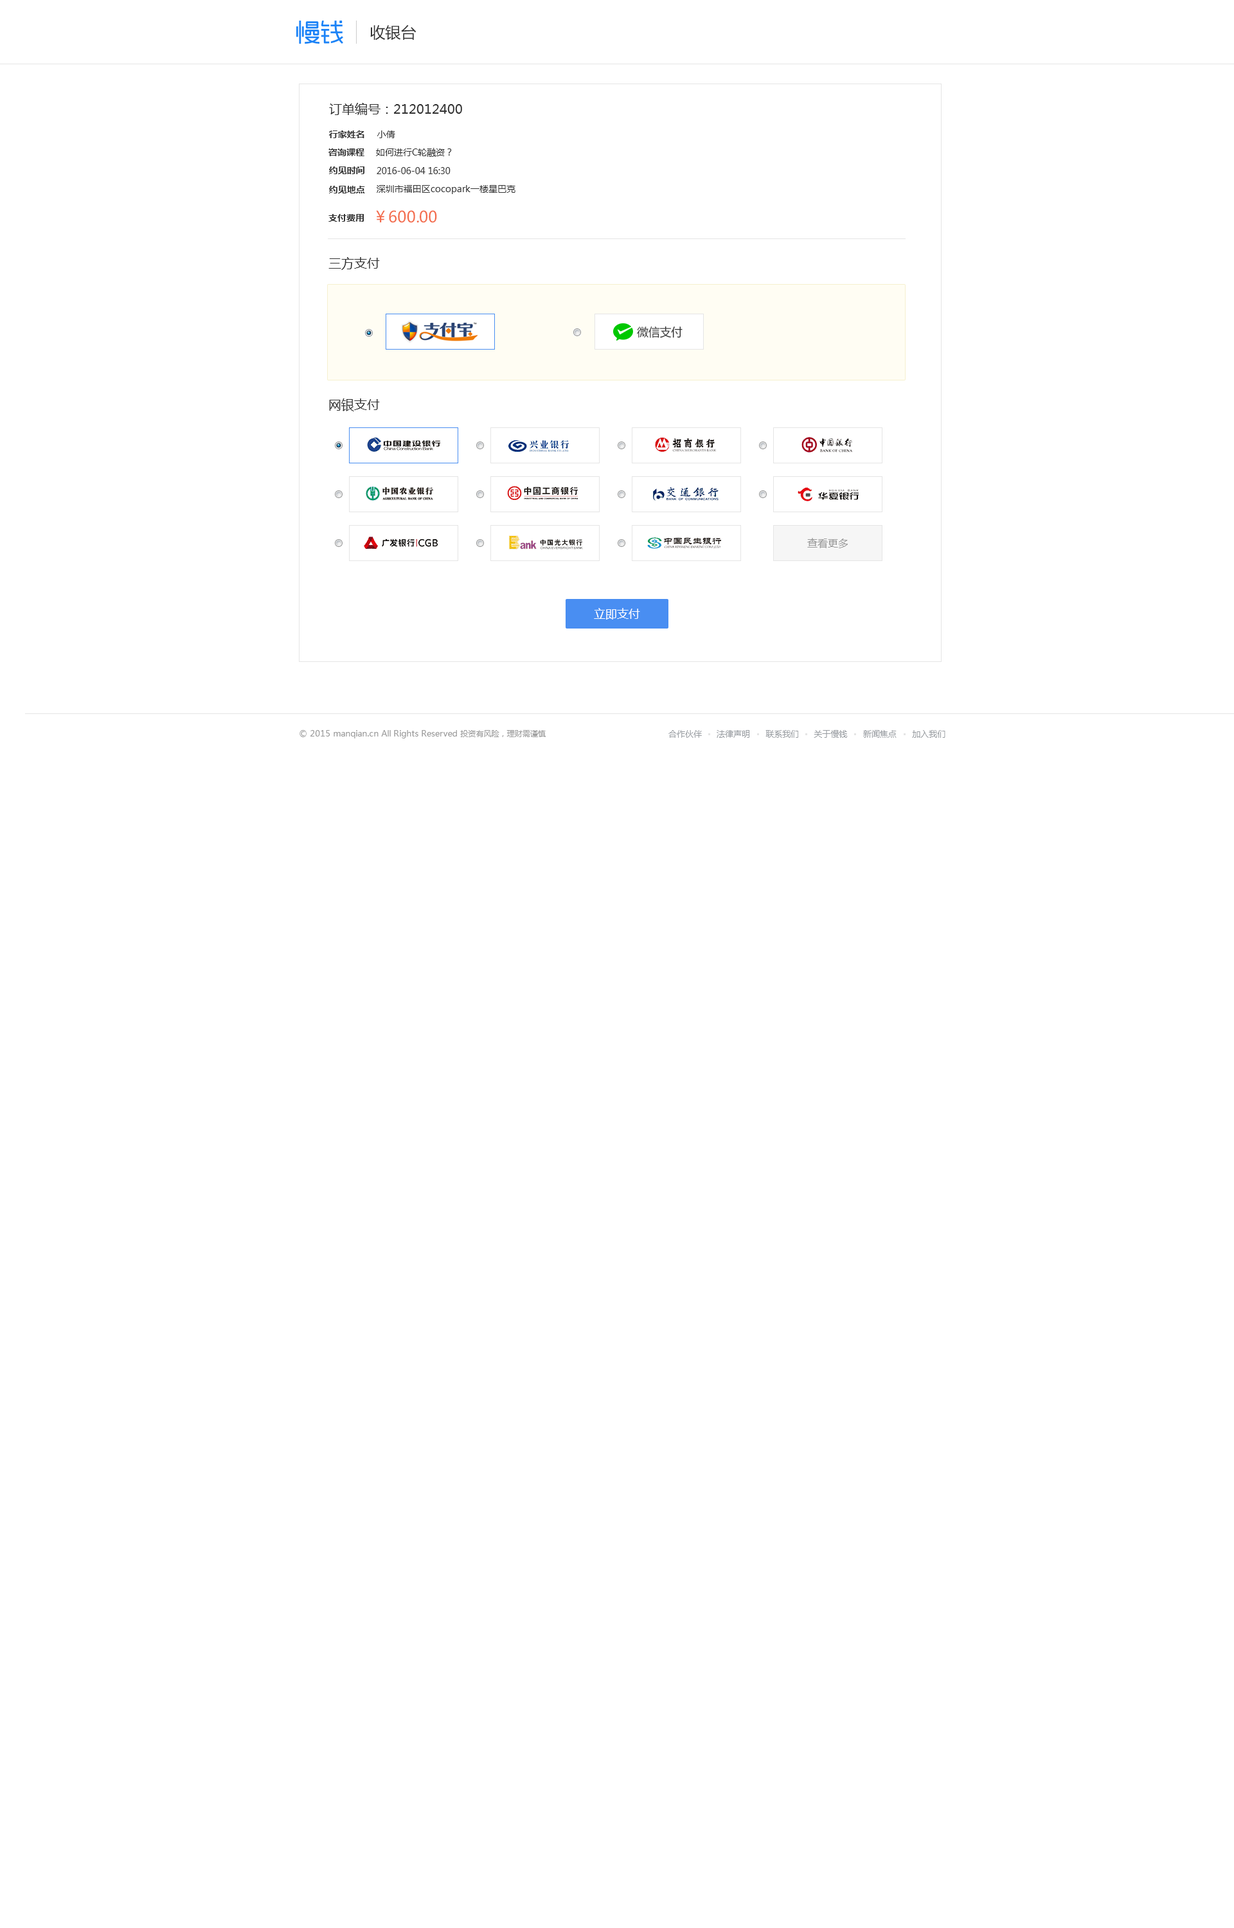
<style>
.page{position:relative;width:1234px;height:1928px;background:#ffffff}
.page>*{position:absolute;margin:0}
.t1{font:15.4px "MicrosoftYaHei";color:#333333}
.t2{font:12.9px "MicrosoftYaHei";color:#333333}
.t3{font:9px "MicrosoftYaHei-Bold";color:#333333}
.t4{font:9px "MicrosoftYaHei";color:#333333}
.t5{font:15.4px "MicrosoftYaHei";color:#f36c4c}
.t6{font:11.6px "MicrosoftYaHei";color:#333333}
.t7{font:10.3px "MicrosoftYaHei";color:#999999}
.t8{font:11.6px "MicrosoftYaHei";color:#ffffff}
.t9{font:8.4px "MicrosoftYaHei";color:#999999}
.t10{font:7.7px "MicrosoftYaHei";color:#999999}
.t11{font:8.4px "MicrosoftYaHei";color:#989ca1}
.t12{font:8.3px "MicrosoftYaHei";color:#989ca1}
</style>
<div class="page">
<p class="t1" style="left:370px;top:24px;width:46px;height:16px">收银台</p>
<p class="t2" style="left:329px;top:103px;width:133px;height:12px">订单编号：212012400</p>
<p class="t3" style="left:329px;top:130px;width:35px;height:8px">行家姓名</p>
<p class="t4" style="left:377px;top:130px;width:18px;height:8px">小倩</p>
<p class="t3" style="left:328px;top:148px;width:36px;height:8px">咨询课程</p>
<p class="t4" style="left:376px;top:148px;width:76px;height:9px">如何进行C轮融资？</p>
<p class="t3" style="left:329px;top:166px;width:35px;height:8px">约见时间</p>
<p class="t4" style="left:377px;top:167px;width:73px;height:7px">2016-06-04 16:30</p>
<p class="t3" style="left:329px;top:186px;width:36px;height:7px">约见地点</p>
<p class="t4" style="left:377px;top:185px;width:138px;height:9px">深圳市福田区cocopark一楼星巴克</p>
<p class="t3" style="left:328px;top:214px;width:36px;height:8px">支付费用</p>
<p class="t5" style="left:376px;top:210px;width:61px;height:13px">￥600.00</p>
<p class="t2" style="left:328px;top:257px;width:52px;height:13px">三方支付</p>
<p class="t6" style="left:637px;top:326px;width:45px;height:12px">微信支付</p>
<p class="t2" style="left:329px;top:398px;width:51px;height:13px">网银支付</p>
<p class="t7" style="left:807px;top:538px;width:41px;height:10px">查看更多</p>
<p class="t8" style="left:594px;top:608px;width:46px;height:11px">立即支付</p>
<p class="t9" style="left:299px;top:730px;width:158px;height:8px">© 2015 manqian.cn All Rights Reserved</p>
<p class="t10" style="left:460px;top:730px;width:86px;height:7px">投资有风险，理财需谨慎</p>
<p class="t11" style="left:668px;top:730px;width:34px;height:8px">合作伙伴</p>
<p class="t12" style="left:717px;top:730px;width:32px;height:8px">法律声明</p>
<p class="t12" style="left:765px;top:730px;width:33px;height:8px">联系我们</p>
<p class="t12" style="left:814px;top:730px;width:34px;height:8px">关于慢钱</p>
<p class="t12" style="left:863px;top:730px;width:33px;height:8px">新闻焦点</p>
<p class="t12" style="left:912px;top:730px;width:33px;height:8px">加入我们</p>
</div>
